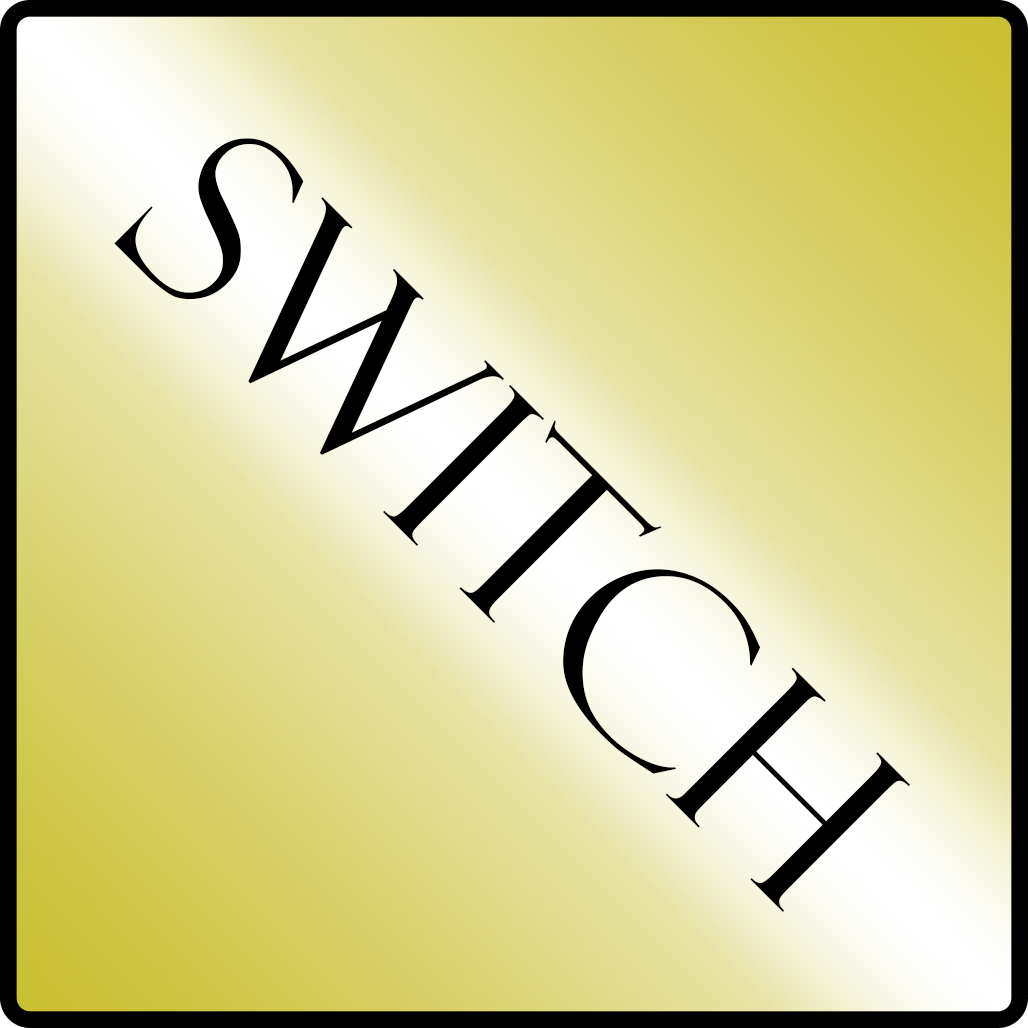
<style>
.page{position:relative;width:1028px;height:1028px}
.page>*{position:absolute;margin:0}
.t1{font:250px "FelixTitlingMT";color:#000000}
</style>
<div class="page">
<p class="t1" style="left:114px;top:138px;width:797px;height:774px;rotate:45deg">Switch</p>
</div>
